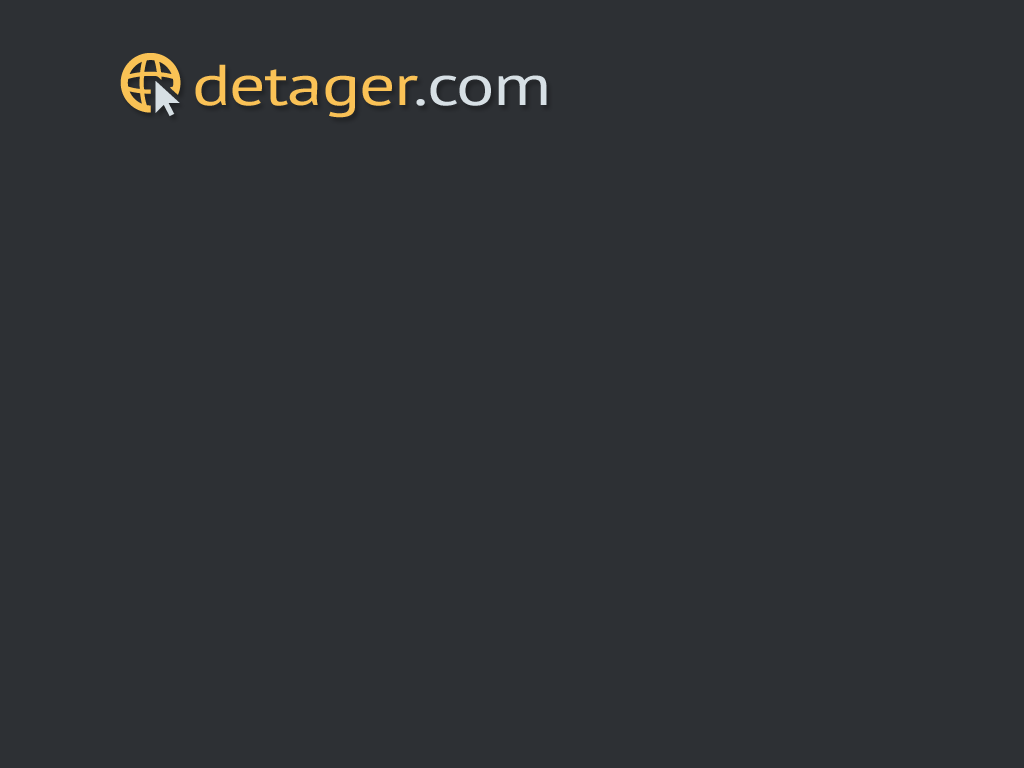
<style>
.page{position:relative;width:1024px;height:768px;background:#2d3034}
.page>*{position:absolute;margin:0}
.t1{font:57.6px "PTSans-Regular";letter-spacing:-0.02em;color:#fac256;scale:1.25 1}
.t2{font:57.6px "PTSans-Regular";letter-spacing:-0.02em;color:#d7e0e5;scale:1.25 1}
</style>
<div class="page">
<p class="t1" style="left:195px;top:64px;width:352px;height:54px">detager<span class="t2">.com</span></p>
</div>
